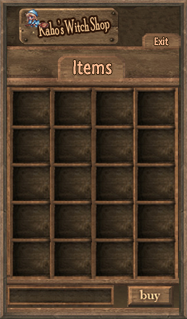
<style>
.page{position:relative;width:187px;height:319px}
.page>*{position:absolute;margin:0}
.t1{font:18.4px "PoorRichard-Regular";scale:0.54 1}
.t2{font:10.9px "SegoeMarker";color:#fcbe95}
.t3{font:20px "SegoeMarker";color:#fcbe95}
</style>
<div class="page">
<p class="t1" style="left:38px;top:16px;width:72px;height:21px;rotate:-7deg">Kaho’s Witch Shop</p>
<p class="t2" style="left:154px;top:37px;width:15px;height:9px">Exit</p>
<p class="t3" style="left:73px;top:60px;width:39px;height:15px">Items</p>
</div>
